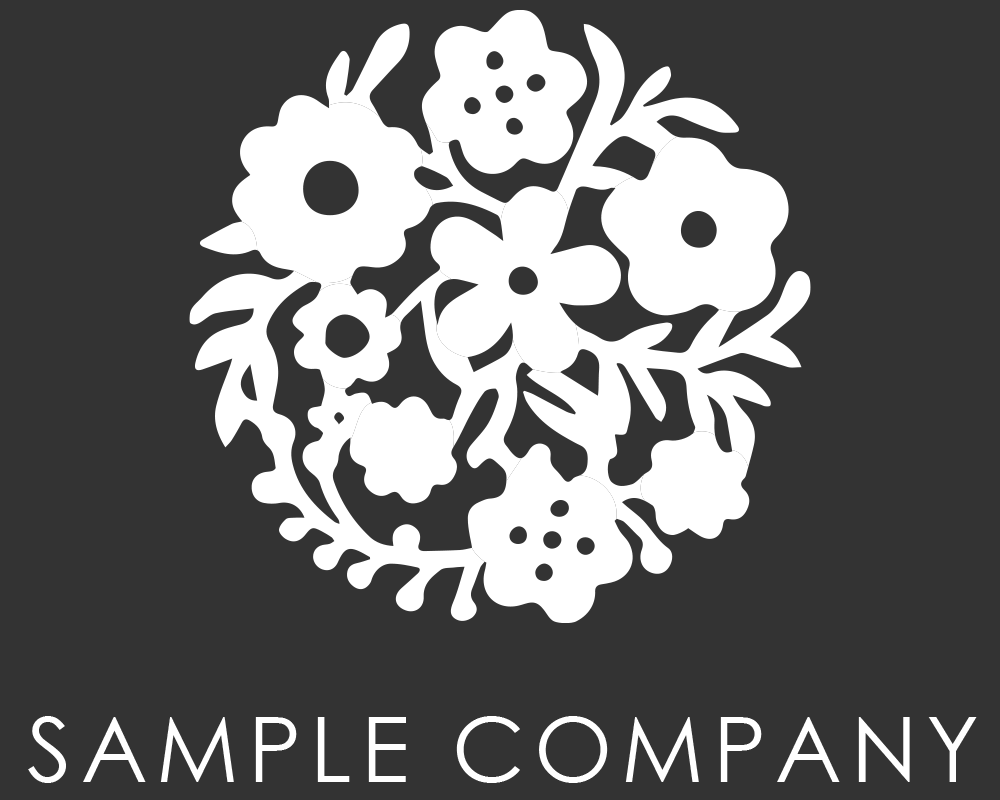
<style>
.page{position:relative;width:1000px;height:800px;background:#333333}
.page>*{position:absolute;margin:0}
.t1{font:90px "CenturyGothic";letter-spacing:0.1em;color:#ffffff}
</style>
<div class="page">
<p class="t1" style="left:28px;top:716px;width:949px;height:67px">SAMPLE COMPANY</p>
</div>
